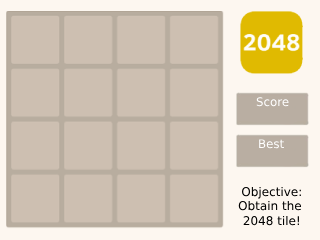
<style>
.page{position:relative;width:320px;height:240px;background:#cdbfb1}
.page>*{position:absolute;margin:0}
.t1{font:11.8px "DejaVuSans";color:#ffffff}
.t2{font:12px "DejaVuSans";color:#000000}
</style>
<div class="page">
<p class="t1" style="left:256px;top:97px;width:33px;height:10px">Score</p>
<p class="t1" style="left:259px;top:139px;width:25px;height:10px">Best</p>
<p class="t2" style="left:238px;top:186px;width:64px;height:40px;text-align:center">Objective:<br>Obtain the <br>2048 tile!</p>
</div>
